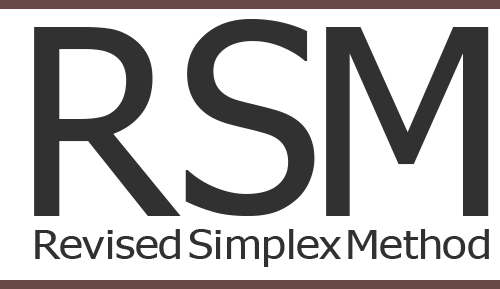
<style>
.page{position:relative;width:500px;height:289px;background:#ffffff}
.page>*{position:absolute;margin:0}
.t1{font:259.6px "Tahoma";color:#313131}
.t2{font:40.3px "Tahoma";color:#313131;scale:1.11 1}
</style>
<div class="page">
<p class="t1" style="left:34px;top:27px;width:147px;height:189px">R</p>
<p class="t1" style="left:185px;top:19px;width:130px;height:197px">S</p>
<p class="t1" style="left:326px;top:27px;width:163px;height:189px">M</p>
<p class="t2" style="left:35px;top:229px;width:145px;height:30px">Revised</p>
<p class="t2" style="left:189px;top:229px;width:152px;height:38px">Simplex</p>
<p class="t2" style="left:348px;top:229px;width:141px;height:30px">Method</p>
</div>
